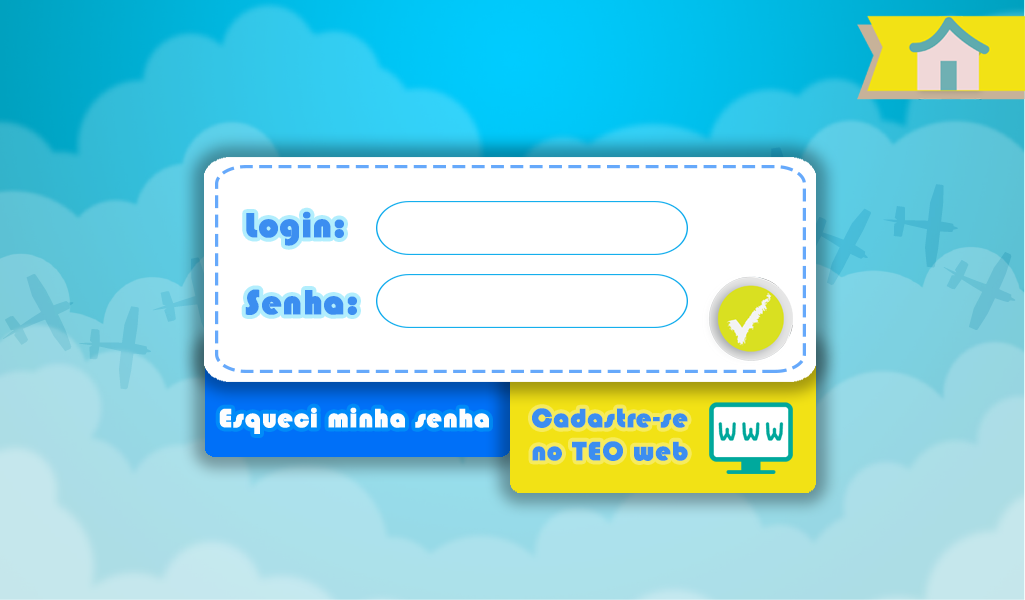
<style>
.page{position:relative;width:1025px;height:600px}
.page>*{position:absolute;margin:0}
.t1{font:36px "Blippo-Heavy";color:#3c8ef0;font-weight:bold}
.t2{font:27.5px "Blippo-Heavy";color:#3c8ef0;font-weight:bold}
</style>
<div class="page">
<p class="t1" style="left:246px;top:211px;width:98px;height:35px">Login:</p>
<p class="t1" style="left:245px;top:289px;width:112px;height:26px">Senha:</p>
<p class="t2" style="left:532px;top:408px;width:156px;height:53px">Cadastre-se <br>no TEO web</p>
</div>
